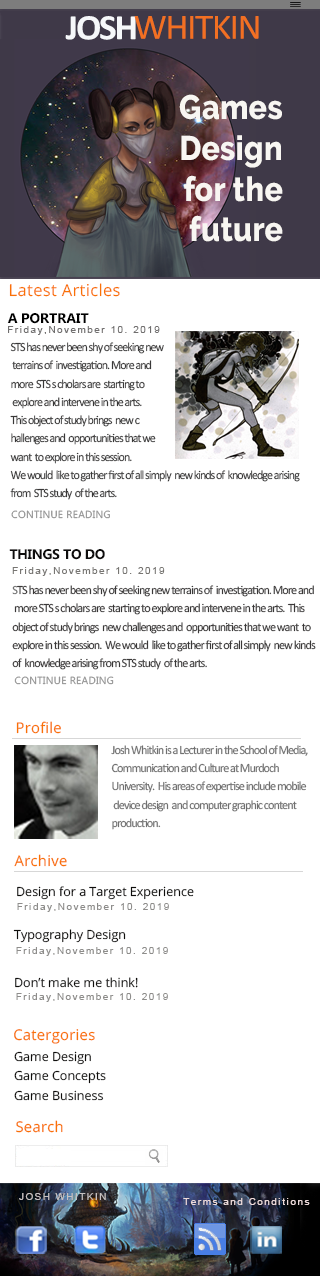
<style>
.page{position:relative;width:320px;height:1276px;background:#ffffff}
.page>*{position:absolute;margin:0}
.t1{font:35.9px "Calibri-Bold";letter-spacing:-0.06em;color:#f6f8fa;scale:1.04 1}
.t2{font:35.9px "Calibri";letter-spacing:-0.04em;color:#f27022;scale:1.04 1}
.t3{font:34px "Raleway-ExtraBold";letter-spacing:0.012em;color:#f8f6f2;scale:0.89 1}
.t4{font:16.5px "OpenSans";letter-spacing:0.02em;color:#f97205}
.t5{font:13.9px "Ebrima-Bold";color:#000000}
.t6{font:13.9px "Ebrima-Bold";letter-spacing:-0.02em;color:#000000}
.t7{font:9.4px "ArialMT";letter-spacing:0.18em;color:#706e6e}
.t8{font:12.4px/18.3px "Calibri";letter-spacing:-0.08em;color:#393838;scale:0.96 1}
.t9{font:10.4px "Ebrima";letter-spacing:0.02em;color:#959595}
.t10{font:13.9px "Ebrima-Bold";letter-spacing:-0.02em;color:#0e0d0d}
.t11{font:9.4px "ArialMT";letter-spacing:0.18em;color:#777572}
.t12{font:12.4px/18.3px "Calibri";letter-spacing:-0.08em;color:#3a3838}
.t13{font:12.4px/18.3px "Calibri";letter-spacing:-0.08em;color:#707070}
.t14{font:14.8px "OpenSans";letter-spacing:0.02em;color:#f97205}
.t15{font:12.4px "OpenSans";color:#0f0e0c}
.t16{font:9.4px "ArialMT";letter-spacing:0.18em;color:#8e8d8b}
.t17{font:9.4px "ArialMT";letter-spacing:0.18em;color:#c6c1c1}
.t18{font:9.4px "ArialMT";letter-spacing:0.18em;color:#eddbdb}
</style>
<div class="page">
<p class="t1" style="left:65px;top:16px;width:71px;height:24px">JOSH</p>
<p class="t2" style="left:134px;top:16px;width:125px;height:23px">WHITKIN</p>
<p class="t3" style="left:179px;top:94px;width:104px;height:148px;text-align:right">Games<br>Design<br>for the<br>future</p>
<p class="t4" style="left:9px;top:283px;width:111px;height:14px">Latest Articles</p>
<p class="t5" style="left:7px;top:313px;width:82px;height:11px"><span class="t6">A</span> PORTRAIT</p>
<p class="t7" style="left:8px;top:326px;width:152px;height:9px">Friday,November 10. 2019</p>
<p class="t8" style="left:10px;top:342px;width:290px;height:158px">STS has never been shy of seeking new<br> terrains of  investigation. More and  <br>more  STS s cholars are  starting to<br> explore and intervene in the arts.  <br>This object of study brings  new c<br>hallenges and  opportunities that we <br>want  to explore in this session.  <br>We would  like to gather first of all simply  new kinds of  knowledge arising <br>from  STS study  of the arts.</p>
<p class="t9" style="left:11px;top:510px;width:99px;height:9px">CONTINUE READING</p>
<p class="t10" style="left:9px;top:549px;width:96px;height:11px">THINGS TO DO</p>
<p class="t11" style="left:12px;top:567px;width:153px;height:9px">Friday,November 10. 2019</p>
<p class="t12" style="left:12px;top:585px;width:304px;height:85px"><span class="t13">S</span>TS has never been shy of seeking new terrains of  investigation. More and <br> more STS s cholars are  starting to explore and intervene in the arts.  This <br>object of study brings  new challenges and  opportunities that we want  to <br>explore in this session.  We would  like to gather first of all simply  new kinds <br>of  knowledge arising from STS study  of the arts.</p>
<p class="t9" style="left:14px;top:676px;width:100px;height:9px">CONTINUE READING</p>
<p class="t14" style="left:16px;top:721px;width:45px;height:13px">Profile</p>
<p class="t13" style="left:111px;top:745px;width:197px;height:85px">Josh Whitkin is a Lecturer in the School of Media, <br>Communication and Culture at Murdoch <br>University.  His areas of expertise include mobile<br> device design  and computer graphic content <br>production.</p>
<p class="t14" style="left:14px;top:854px;width:53px;height:13px">Archive</p>
<p class="t15" style="left:17px;top:886px;width:177px;height:14px">Design for a Target Experience</p>
<p class="t16" style="left:17px;top:903px;width:152px;height:9px">Friday,November 10. 2019</p>
<p class="t15" style="left:13px;top:929px;width:113px;height:14px">Typography Design</p>
<p class="t16" style="left:16px;top:947px;width:152px;height:9px">Friday,November 10. 2019</p>
<p class="t15" style="left:15px;top:977px;width:123px;height:11px">Don’t make me think!</p>
<p class="t16" style="left:16px;top:993px;width:152px;height:9px">Friday,November 10. 2019</p>
<p class="t14" style="left:14px;top:1029px;width:81px;height:15px">Catergories</p>
<p class="t15" style="left:14px;top:1051px;width:77px;height:14px">Game Design</p>
<p class="t15" style="left:14px;top:1070px;width:92px;height:14px">Game Concepts</p>
<p class="t15" style="left:14px;top:1090px;width:90px;height:11px">Game Business</p>
<p class="t14" style="left:16px;top:1120px;width:47px;height:13px">Search</p>
<p class="t17" style="left:19px;top:1193px;width:87px;height:7px">JOSH WHITKIN</p>
<p class="t18" style="left:183px;top:1198px;width:127px;height:7px">Terms and Conditions</p>
</div>
